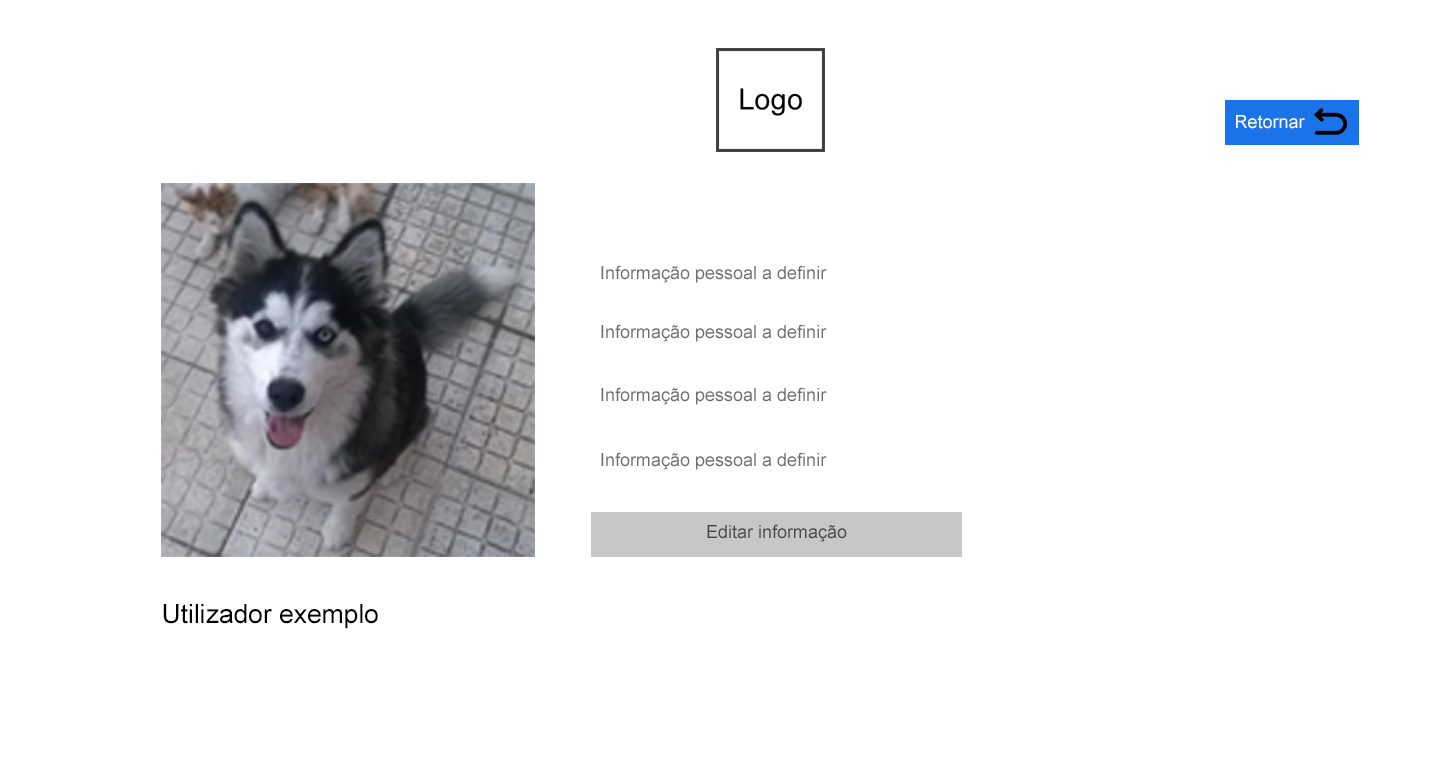
<style>
.page{position:relative;width:1431px;height:780px;background:#ffffff}
.page>*{position:absolute;margin:0}
.t1{font:18px "ArialMT";color:#ffffff}
.t2{font:18px "ArialMT";color:#6e6e6e}
.t3{font:18px "ArialMT";color:#484848}
.t4{font:26.4px "ArialMT";color:#000000}
</style>
<div class="page">
<p class="t1" style="left:1236px;top:115px;width:69px;height:14px">Retornar</p>
<p class="t2" style="left:601px;top:265px;width:226px;height:18px">Informação pessoal a definir</p>
<p class="t2" style="left:601px;top:324px;width:226px;height:18px">Informação pessoal a definir</p>
<p class="t2" style="left:601px;top:387px;width:226px;height:18px">Informação pessoal a definir</p>
<p class="t2" style="left:601px;top:452px;width:226px;height:18px">Informação pessoal a definir</p>
<p class="t3" style="left:707px;top:524px;width:140px;height:18px">Editar informação</p>
<p class="t4" style="left:163px;top:604px;width:215px;height:25px">Utilizador exemplo</p>
</div>
